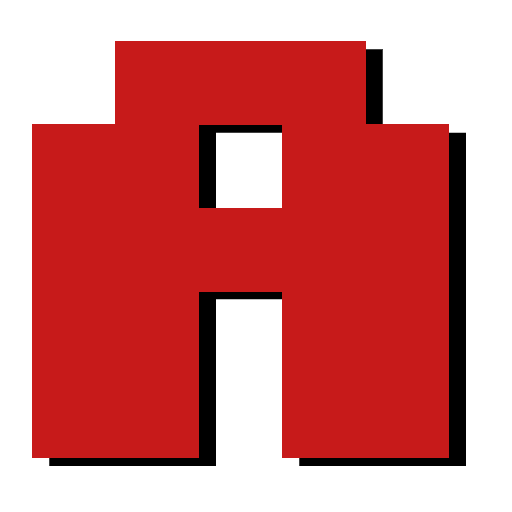
<style>
.page{position:relative;width:512px;height:512px;background:#c71a1a}
.page>*{position:absolute;margin:0}
.t1{font:700px "Silkscreen-Bold";color:#c71a1a}
</style>
<div class="page">
<p class="t1" style="left:49px;top:49px;width:417px;height:417px">A</p>
</div>
